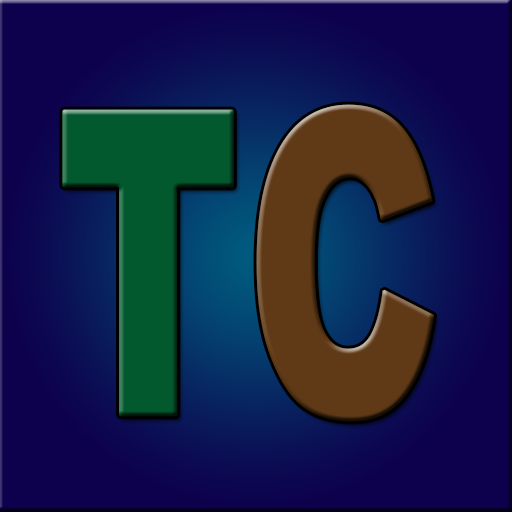
<style>
.page{position:relative;width:512px;height:512px;background:#0d004c}
.page>*{position:absolute;margin:0}
.t1{font:423.6px "Arial-Black";color:#03592e;font-weight:bold;scale:0.59 1}
.t2{font:423.6px "Arial-Black";color:#603a17;font-weight:bold;scale:0.59 1}
</style>
<div class="page">
<p class="t1" style="left:62px;top:104px;width:373px;height:318px">T<span class="t2">C</span></p>
</div>
